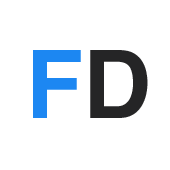
<style>
.page{position:relative;width:170px;height:170px;background:#ffffff}
.page>*{position:absolute;margin:0}
.t1{font:94px "Helvetica-Bold";color:#1c87f2}
.t2{font:94px "Helvetica-Bold";color:#252526}
</style>
<div class="page">
<p class="t1" style="left:33px;top:50px;width:115px;height:68px">F<span class="t2">D</span></p>
</div>
